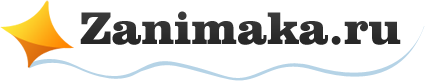
<style>
.page{position:relative;width:425px;height:81px;background:#ffffff}
.page>*{position:absolute;margin:0}
.t1{font:47px "ClarendonBT-Black";color:#2d2d2d}
</style>
<div class="page">
<p class="t1" style="left:80px;top:11px;width:321px;height:34px">Zanimaka.ru</p>
</div>
